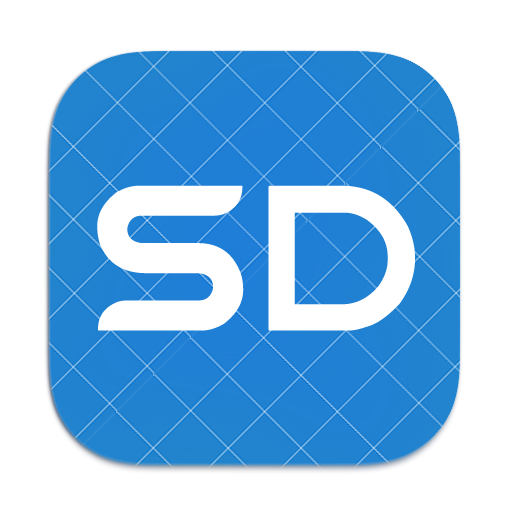
<style>
.page{position:relative;width:512px;height:512px;background:#ffffff}
.page>*{position:absolute;margin:0}
.t1{font:258.7px "FIFAWelcome";color:#ffffff}
</style>
<div class="page">
<p class="t1" style="left:97px;top:185px;width:318px;height:146px">SD</p>
</div>
